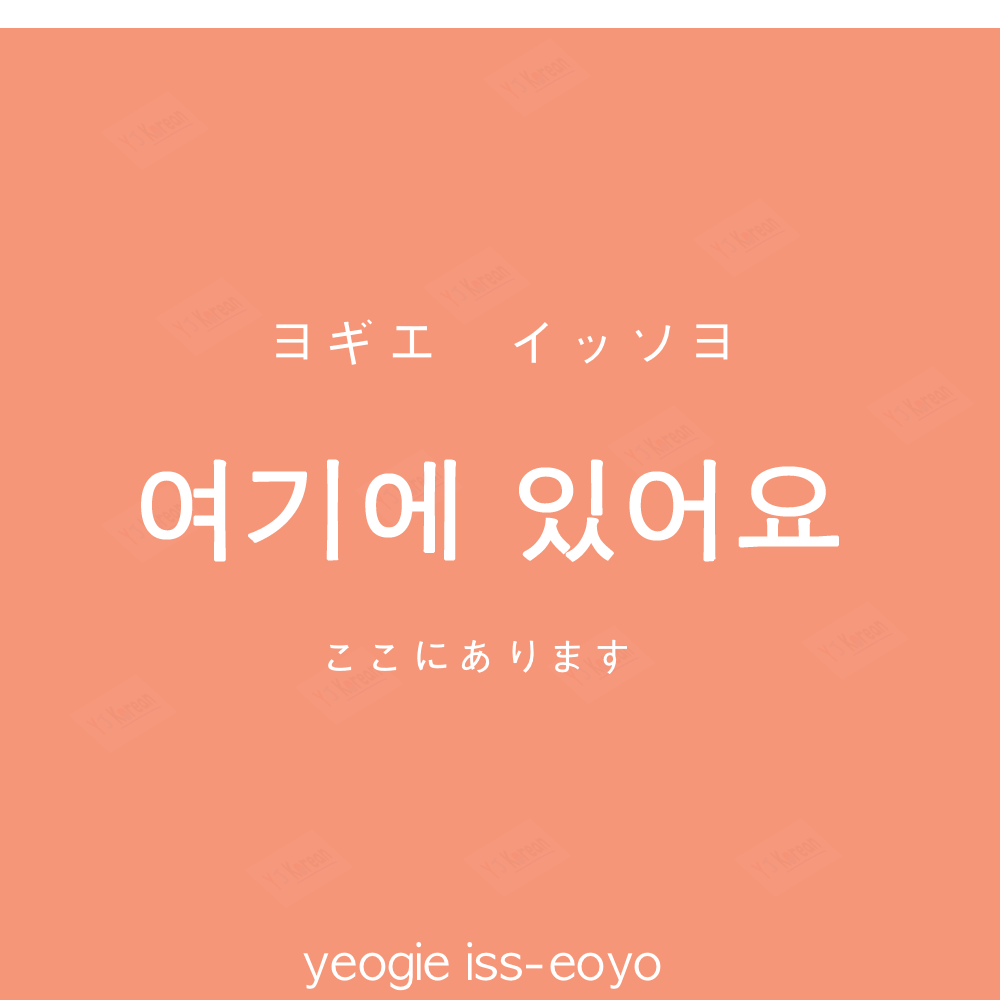
<style>
.page{position:relative;width:1000px;height:1000px;background:#f69679}
.page>*{position:absolute;margin:0}
.t1{font:60px "AppleGothic";color:#ffffff}
.t2{font:110px "AppleGothic";color:#ffffff;font-weight:bold}
.t3{font:45px "AppleGothic";color:#ffffff}
.t4{font:50px "AppleGothic";color:#ffffff}
</style>
<div class="page">
<p class="t1" style="left:276px;top:319px;width:452px;height:46px">ヨギエ　イッソヨ</p>
<p class="t2" style="left:141px;top:459px;width:698px;height:103px">여기에 있어요</p>
<p class="t3" style="left:328px;top:639px;width:299px;height:35px">ここにあります</p>
<p class="t4" style="left:303px;top:942px;width:358px;height:49px">yeogie iss-eoyo</p>
</div>
